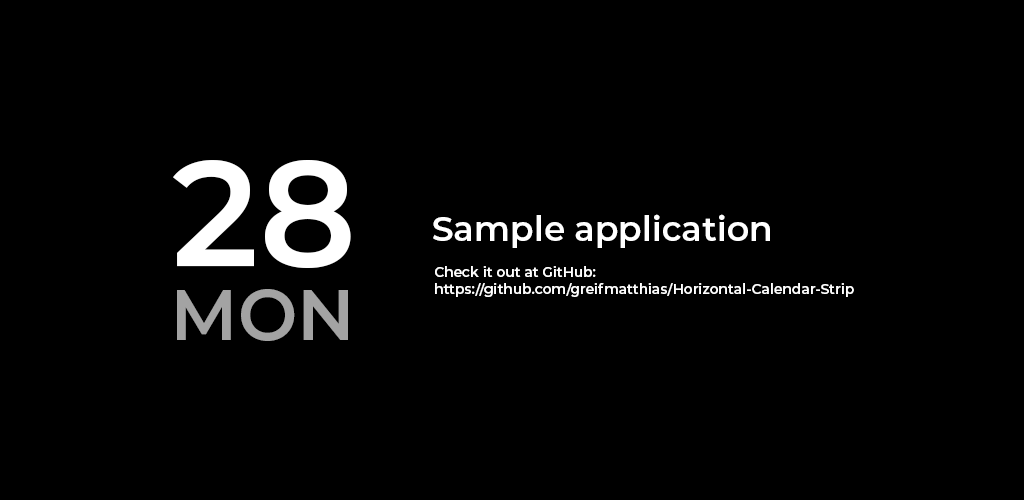
<style>
.page{position:relative;width:1024px;height:500px;background:#000000}
.page>*{position:absolute;margin:0}
.t1{font:149.2px "Montserrat-SemiBold";color:#ffffff}
.t2{font:34.2px "Montserrat-SemiBold";color:#ffffff}
.t3{font:13.8px "Montserrat-SemiBold";color:#ffffff}
.t4{font:71.7px "Montserrat-SemiBold";color:#a3a3a3}
</style>
<div class="page">
<p class="t1" style="left:173px;top:160px;width:178px;height:108px">28</p>
<p class="t2" style="left:433px;top:214px;width:337px;height:34px">Sample application</p>
<p class="t3" style="left:435px;top:266px;width:419px;height:31px">Check it out at GitHub:<br>https://github.com/greifmatthias/Horizontal-Calendar-Strip</p>
<p class="t4" style="left:177px;top:289px;width:171px;height:52px">MON</p>
</div>
